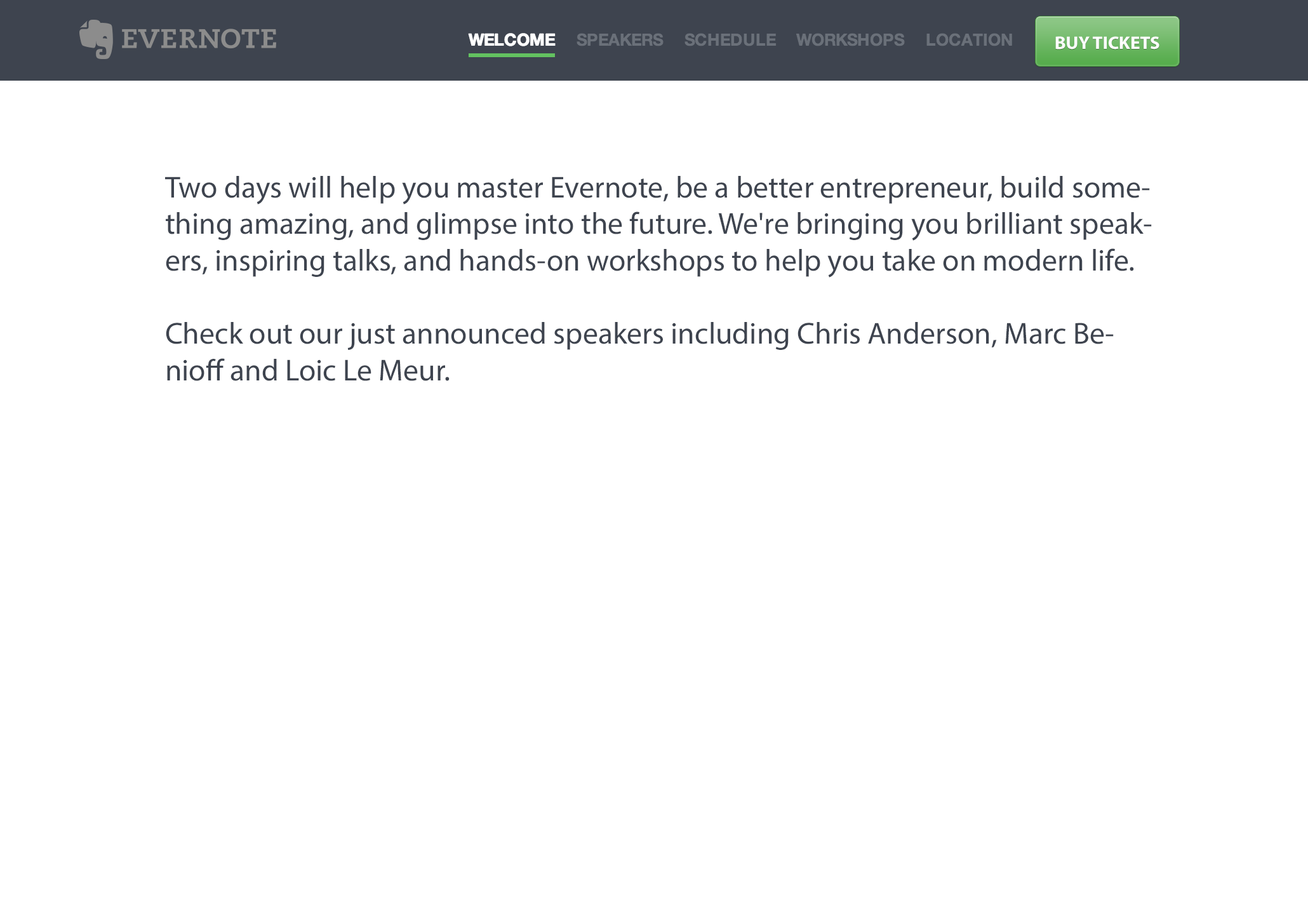
<style>
.page{position:relative;width:1308px;height:912px;background:#ffffff}
.page>*{position:absolute;margin:0}
.t1{font:18.2px "MyriadPro-Bold";color:#ffffff}
.t2{font:30.5px "MyriadPro-Regular";color:#3e444f}
</style>
<div class="page">
<p class="t1" style="left:1055px;top:36px;width:104px;height:14px">BUY TICKETS</p>
<p class="t2" style="left:165px;top:176px;width:987px;height:205px">Two days will help you master Evernote, be a better entrepreneur, build something amazing, and glimpse into the future. We're bringing you brilliant speakers, inspiring talks, and hands-on workshops to help you take on modern life.<br><br>Check out our just announced speakers including Chris Anderson, Marc Benioff and Loic Le Meur.</p>
</div>
